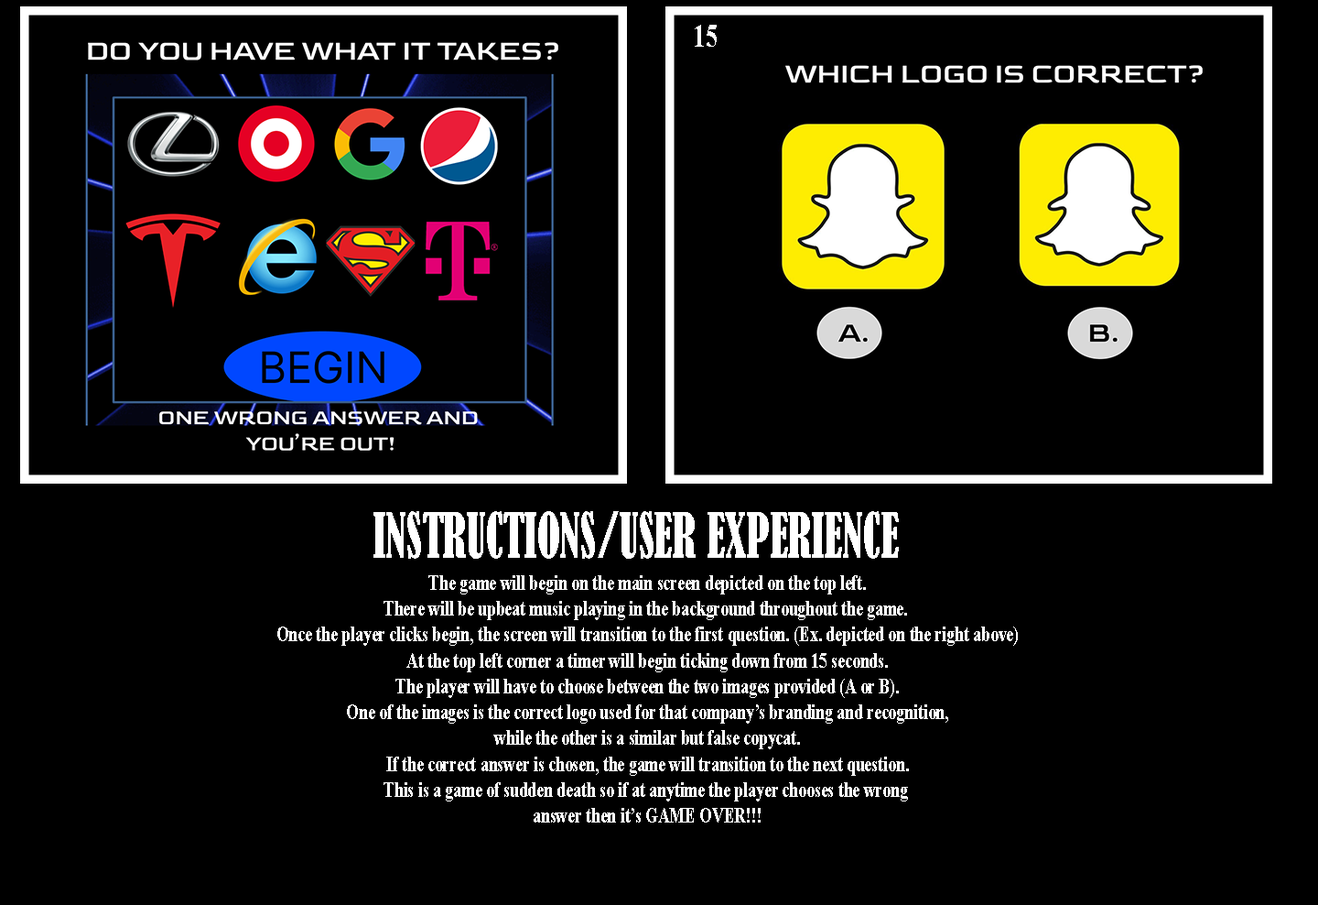
<style>
.page{position:relative;width:1318px;height:905px;background:#000000}
.page>*{position:absolute;margin:0}
.t1{font:32.3px "TimesNewRomanPS-BoldMT";color:#ffffff}
.t2{font:58.3px "BernardMT-Condensed";color:#ffffff}
.t3{font:21.5px "TimesNewRomanPS-BoldMT";color:#ffffff}
</style>
<div class="page">
<p class="t1" style="left:695px;top:25px;width:22px;height:22px">15</p>
<p class="t2" style="left:374px;top:511px;width:525px;height:47px">INSTRUCTIONS/USER EXPERIENCE</p>
<p class="t3" style="left:277px;top:575px;width:741px;height:247px;text-align:center">The game will begin on the main screen depicted on the top left.<br>There will be upbeat music playing in the background throughout the game. <br>Once the player clicks begin, the screen will transition to the first question. (Ex. depicted on the right above)<br>At the top left corner a timer will begin ticking down from 15 seconds.<br>The player will have to choose between the two images provided (A or B).<br>One of the images is the correct logo used for that company’s branding and recognition,<br>while the other is a similar but false copycat.<br>If the correct answer is chosen, the game will transition to the next question.<br>This is a game of sudden death so if at anytime the player chooses the wrong <br>answer then it’s GAME OVER!!!</p>
</div>
